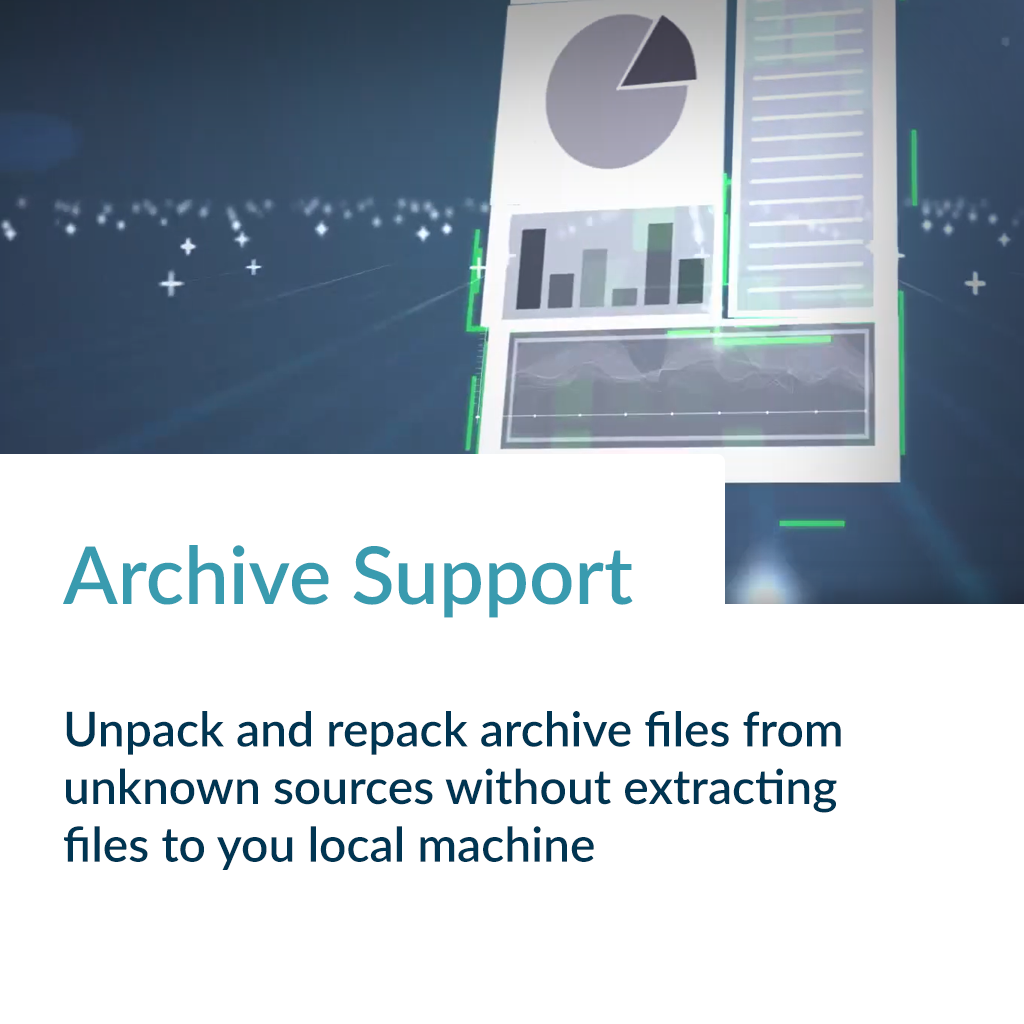
<style>
.page{position:relative;width:1024px;height:1024px;background:#ffffff}
.page>*{position:absolute;margin:0}
.t1{font:79.8px "Lato-Semibold";color:#399baf}
.t2{font:48px "Lato-Semibold";color:#003552}
</style>
<div class="page">
<p class="t1" style="left:63px;top:545px;width:570px;height:73px">Archive Support</p>
<p class="t2" style="left:64px;top:711px;width:777px;height:159px">Unpack and repack archive files from unknown sources without extracting files to you local machine</p>
</div>
